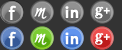
<style>
.page{position:relative;width:122px;height:50px;background:#333333}
.page>*{position:absolute;margin:0}
.t1{font:17.4px "LucidaSansUnicode";letter-spacing:0.01em;color:#ffffff;font-weight:bold}
.t2{font:15.6px "AvenirLT-Heavy";letter-spacing:0.01em;color:#ffffff;font-weight:bold}
.t3{font:18.2px "BaskOldFace";letter-spacing:0.01em;color:#ffffff;font-weight:bold}
.t4{font:11.7px "ArialMT";letter-spacing:0.01em;color:#ffffff;font-weight:bold}
.t5{font:18px "SwanSong";letter-spacing:0.01em;color:#ffffff;font-weight:bold}
</style>
<div class="page">
<p class="t1" style="left:8px;top:5px;width:8px;height:15px">f</p>
<p class="t2" style="left:65px;top:6px;width:14px;height:12px">in</p>
<p class="t3" style="left:95px;top:6px;width:15px;height:13px">g<span class="t4">+</span></p>
<p class="t5" style="left:34px;top:7px;width:13px;height:12px">m</p>
<p class="t1" style="left:8px;top:31px;width:8px;height:16px">f</p>
<p class="t5" style="left:34px;top:33px;width:13px;height:12px">m</p>
<p class="t2" style="left:65px;top:32px;width:14px;height:13px">in</p>
<p class="t3" style="left:95px;top:33px;width:15px;height:12px">g<span class="t4">+</span></p>
</div>
